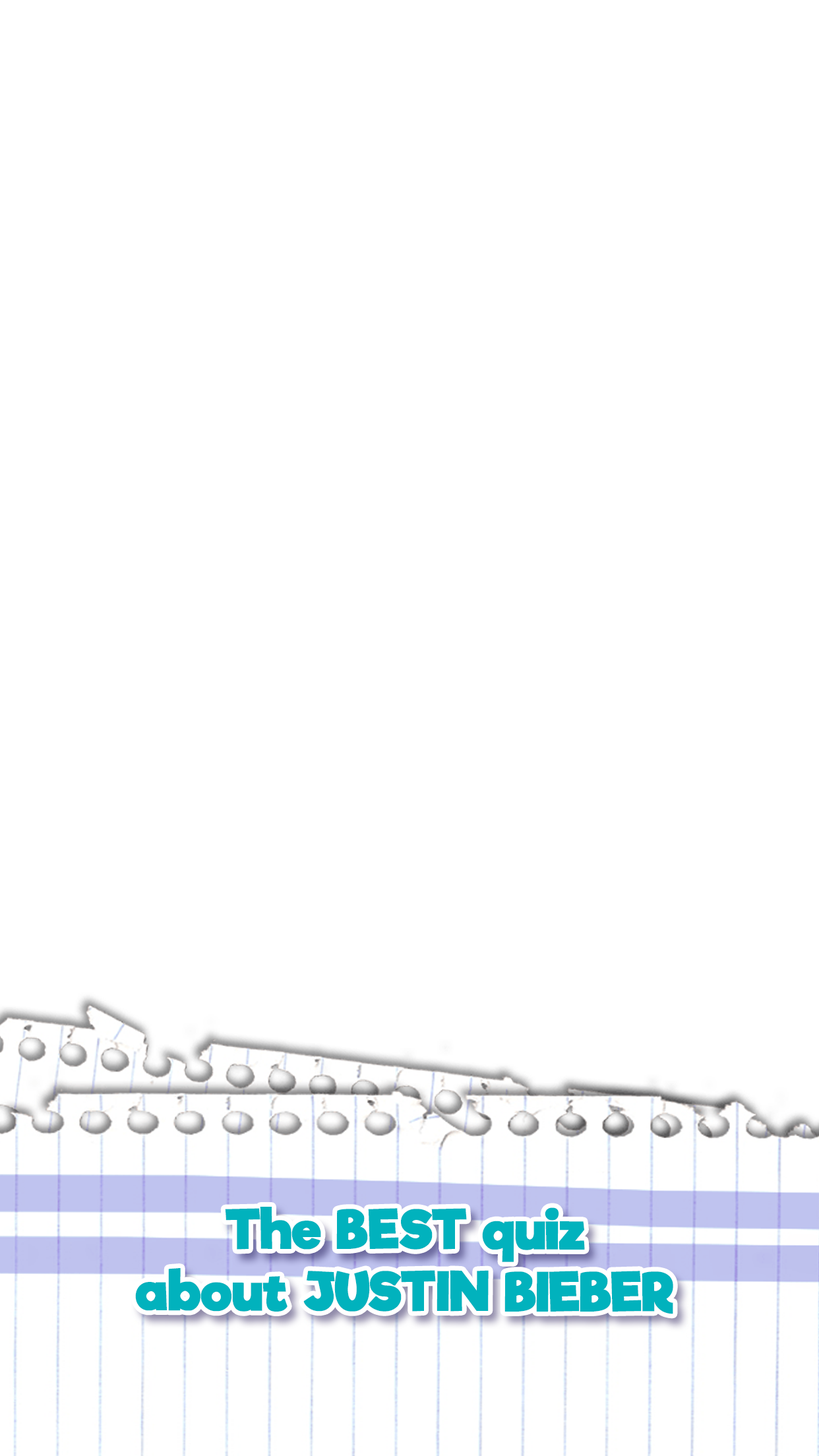
<style>
.page{position:relative;width:819px;height:1456px;background:#ffffff}
.page>*{position:absolute;margin:0}
.t1{font:51.5px "RifficFree-Bold";color:#01b2bd;font-weight:bold}
.t2{font:51.5px "RifficFree-Bold";color:#01b2bd;text-transform:uppercase;font-weight:bold}
</style>
<div class="page">
<p class="t1" style="left:135px;top:1207px;width:538px;height:107px;text-align:center">The BEST quiz<br>about <span class="t2">JUSTIN BIEBER</span></p>
</div>
